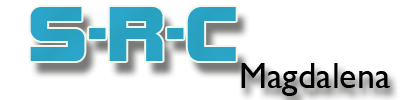
<style>
.page{position:relative;width:400px;height:100px;background:#ffffff}
.page>*{position:absolute;margin:0}
.t1{font:83px "BolsterBold";color:#29a2c3}
.t2{font:36px "GillSansMT";color:#010101}
</style>
<div class="page">
<p class="t1" style="left:30px;top:7px;width:206px;height:54px">S-R-C</p>
<p class="t2" style="left:241px;top:63px;width:149px;height:33px">Magdalena</p>
</div>
